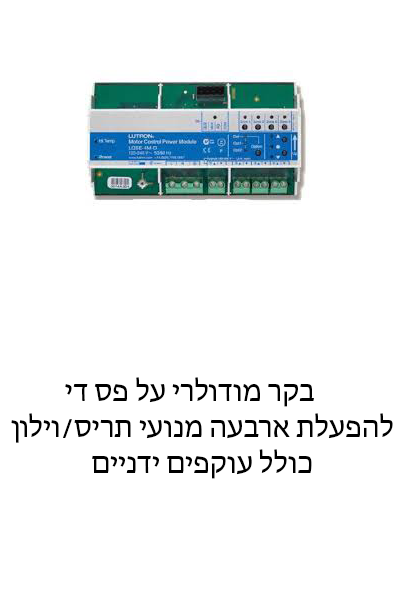
<style>
.page{position:relative;width:400px;height:600px;background:#ffffff}
.page>*{position:absolute;margin:0}
.t1{font:30px "MyriadHebrew-Regular";color:#000000}
</style>
<div class="page">
<p class="t1" style="left:11px;top:377px;width:382px;height:102px;text-align:center">בקר מודולרי על פס די   <br> להפעלת ארבעה מנועי תריס/וילון<br> כולל עוקפים ידניים</p>
</div>
